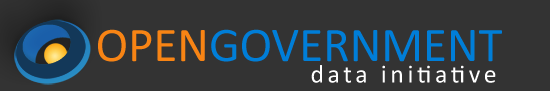
<style>
.page{position:relative;width:550px;height:91px;background:#333333}
.page>*{position:absolute;margin:0}
.t1{font:25.7px/21.7px "Calibri";letter-spacing:0.14em;color:#ffffff}
.t2{font:48.7px/26.7px "Calibri";color:#f88414}
.t3{font:48.7px/26.7px "Calibri";color:#007ed8}
</style>
<div class="page">
<p class="t1" style="left:98px;top:29px;width:404px;height:54px;text-align:right"><span class="t2">OPEN</span><span class="t3">GOVERNMENT<br></span>data initiative</p>
</div>
